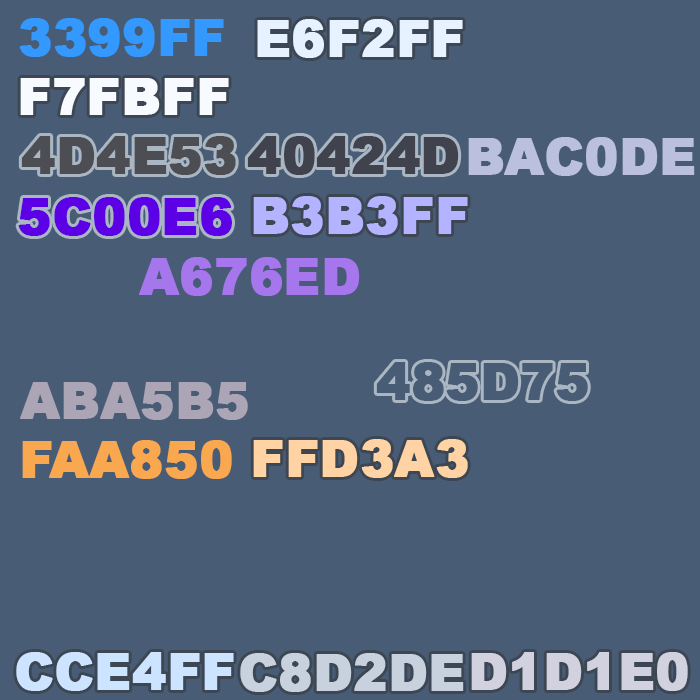
<style>
.page{position:relative;width:700px;height:700px;background:#485d75}
.page>*{position:absolute;margin:0}
.t1{font:50px "Arial-Black";color:#3399ff;font-weight:bold}
.t2{font:50px "Arial-Black";color:#e6f2ff;font-weight:bold}
.t3{font:50px "Arial-Black";color:#f7fbff;font-weight:bold}
.t4{font:50px "Arial-Black";color:#4d4e53;font-weight:bold}
.t5{font:50px "Arial-Black";color:#40424d;font-weight:bold}
.t6{font:50px "Arial-Black";color:#bac0de;font-weight:bold}
.t7{font:50px "Arial-Black";color:#5c00e6;font-weight:bold}
.t8{font:50px "Arial-Black";color:#b3b3ff;font-weight:bold}
.t9{font:50px "Arial-Black";color:#a676ed;font-weight:bold}
.t10{font:50px "Arial-Black";color:#485d75;font-weight:bold}
.t11{font:50px "Arial-Black";color:#aba5b5;font-weight:bold}
.t12{font:50px "Arial-Black";color:#faa850;font-weight:bold}
.t13{font:50px "Arial-Black";color:#ffd3a3;font-weight:bold}
.t14{font:50px "Arial-Black";color:#cce4ff;font-weight:bold}
.t15{font:50px "Arial-Black";color:#c8d2de;font-weight:bold}
.t16{font:50px "Arial-Black";color:#d1d1e0;font-weight:bold}
</style>
<div class="page">
<p class="t1" style="left:19px;top:18px;width:205px;height:39px">3399FF</p>
<p class="t2" style="left:257px;top:19px;width:206px;height:39px">E6F2FF</p>
<p class="t3" style="left:20px;top:78px;width:209px;height:37px">F7FBFF</p>
<p class="t4" style="left:21px;top:136px;width:215px;height:39px">4D4E53</p>
<p class="t5" style="left:247px;top:136px;width:212px;height:39px">40424D</p>
<p class="t6" style="left:468px;top:137px;width:227px;height:39px">BAC0DE</p>
<p class="t7" style="left:18px;top:197px;width:214px;height:39px">5C00E6</p>
<p class="t8" style="left:253px;top:196px;width:215px;height:39px">B3B3FF</p>
<p class="t9" style="left:139px;top:257px;width:221px;height:39px">A676ED</p>
<p class="t10" style="left:376px;top:362px;width:212px;height:39px">485D75</p>
<p class="t11" style="left:20px;top:382px;width:228px;height:38px">ABA5B5</p>
<p class="t12" style="left:22px;top:440px;width:210px;height:39px">FAA850</p>
<p class="t13" style="left:253px;top:439px;width:215px;height:39px">FFD3A3</p>
<p class="t14" style="left:16px;top:652px;width:218px;height:39px">CCE4FF</p>
<p class="t15" style="left:240px;top:653px;width:224px;height:39px">C8D2DE</p>
<p class="t16" style="left:471px;top:652px;width:217px;height:39px">D1D1E0</p>
</div>
